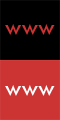
<style>
.page{position:relative;width:60px;height:120px;background:#cc3333}
.page>*{position:absolute;margin:0}
.t1{font:21.4px "Futura-Medium";color:#cc3333}
</style>
<div class="page">
<p class="t1" style="left:5px;top:24px;width:50px;height:11px">www</p>
</div>
